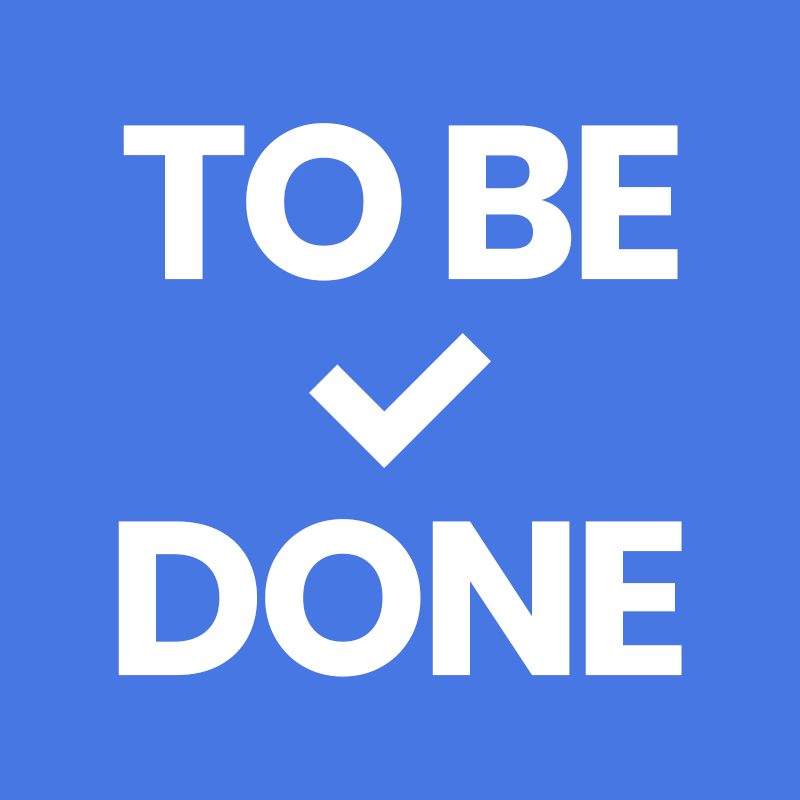
<style>
.page{position:relative;width:800px;height:800px;background:#4677e2}
.page>*{position:absolute;margin:0}
.t1{font:217.1px "Poppins-Bold";letter-spacing:-0.04em;color:#ffffff}
</style>
<div class="page">
<p class="t1" style="left:123px;top:123px;width:555px;height:158px">TO BE</p>
<p class="t1" style="left:118px;top:519px;width:564px;height:158px">DONE</p>
</div>
